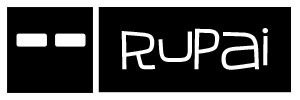
<style>
.page{position:relative;width:300px;height:100px;background:#000000}
.page>*{position:absolute;margin:0}
.t1{font:60px "IguanaLoverBTN";color:#ffffff}
</style>
<div class="page">
<p class="t1" style="left:121px;top:28px;width:147px;height:42px">Rupai</p>
</div>
